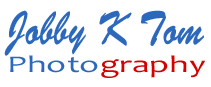
<style>
.page{position:relative;width:211px;height:87px;background:#ffffff}
.page>*{position:absolute;margin:0}
.t1{font:48px "BrushScriptStd";color:#2c69bc;scale:0.75 1}
.t2{font:24px "Candara";color:#d20200;scale:1.5 1}
.t3{font:24px "Candara";color:#2c69bc;scale:1.5 1}
</style>
<div class="page">
<p class="t1" style="left:4px;top:10px;width:200px;height:46px">Jobby K Tom</p>
<p class="t2" style="left:10px;top:55px;width:195px;height:23px"><span class="t3">Photo</span>graphy</p>
</div>
